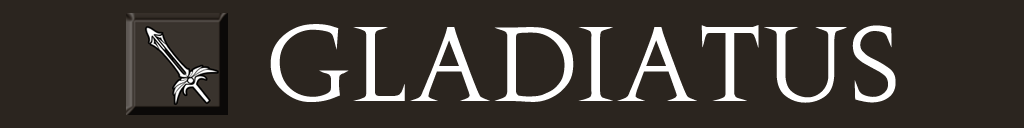
<style>
.page{position:relative;width:1024px;height:128px;background:#2b251f}
.page>*{position:absolute;margin:0}
.t1{font:100px "Augustus";color:#ffffff}
</style>
<div class="page">
<p class="t1" style="left:270px;top:24px;width:626px;height:79px">Gladiatus</p>
</div>
